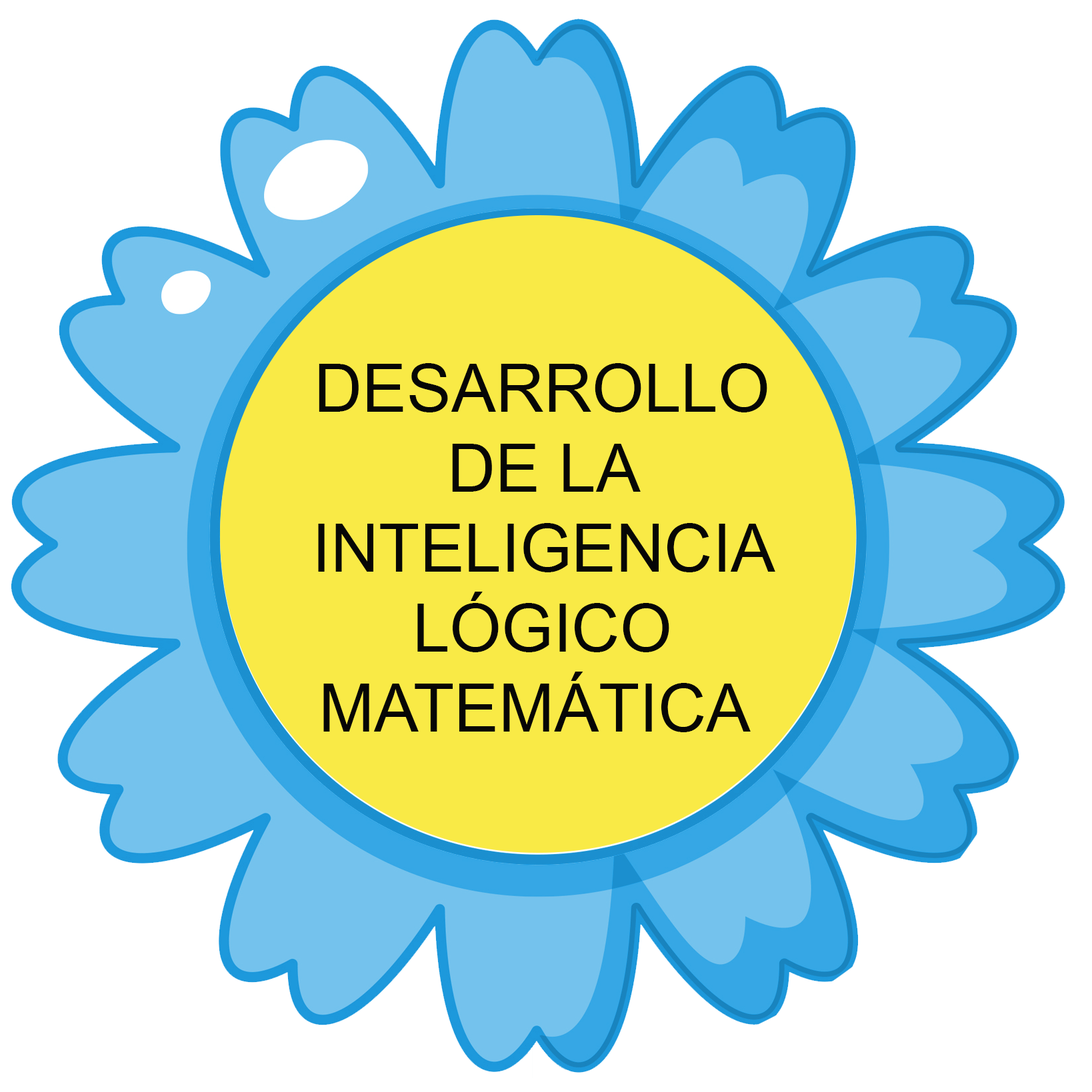
<style>
.page{position:relative;width:1092px;height:1092px;background:#ffffff}
.page>*{position:absolute;margin:0}
.t1{font:66.6px "ArialMT";color:#060606}
</style>
<div class="page">
<p class="t1" style="left:318px;top:363px;width:457px;height:369px;text-align:center">DESARROLLO<br> DE LA <br>INTELIGENCIA<br>LÓGICO<br>MATEMÁTICA</p>
</div>
